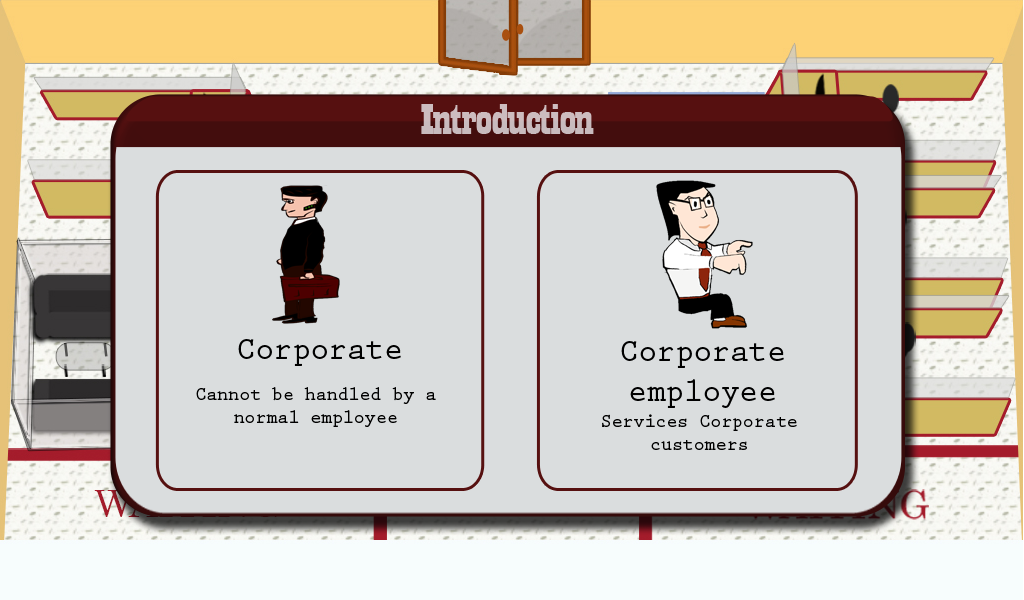
<style>
.page{position:relative;width:1024px;height:600px;background:#daddde}
.page>*{position:absolute;margin:0}
.t1{font:44.6px "Playbill";letter-spacing:-0.025em;color:#c8bbbe;scale:1.61 1}
.t2{font:33.2px "PrestigeEliteStd-Bd";letter-spacing:-0.025em;color:#000000;scale:0.97 1}
.t3{font:19px "PrestigeEliteStd-Bd";letter-spacing:-0.025em;color:#000000}
</style>
<div class="page">
<p class="t1" style="left:421px;top:104px;width:173px;height:30px">Introduction</p>
<p class="t2" style="left:238px;top:339px;width:163px;height:27px">Corporate</p>
<p class="t2" style="left:621px;top:341px;width:163px;height:67px;text-align:center">Corporate<br>employee</p>
<p class="t3" style="left:196px;top:387px;width:240px;height:40px;text-align:center">Cannot be handled by a normal employee</p>
<p class="t3" style="left:602px;top:414px;width:195px;height:36px;text-align:center">Services Corporate customers</p>
</div>
